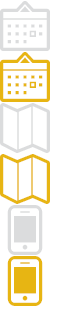
<style>
.page{position:relative;width:69px;height:320px;background:#ffffff}
.page>*{position:absolute;margin:0}
.t1{font:50px/10px "SSSymboliconsLine";letter-spacing:0.005em;color:#dbdcdd}
.t2{font:50px/36px "SSSymboliconsLine";letter-spacing:0.005em;color:#e7b513}
.t3{font:50px/36px "SSSymboliconsLine";letter-spacing:0.005em;color:#dbdcdd}
</style>
<div class="page">
<p class="t1" style="left:0px;top:1px;width:50px;height:305px">Calendar<br><span class="t2">Calendar<br></span><span class="t3">map<br></span><span class="t2">map<br></span><span class="t3">mobile<br></span><span class="t2">mobile</span></p>
</div>
